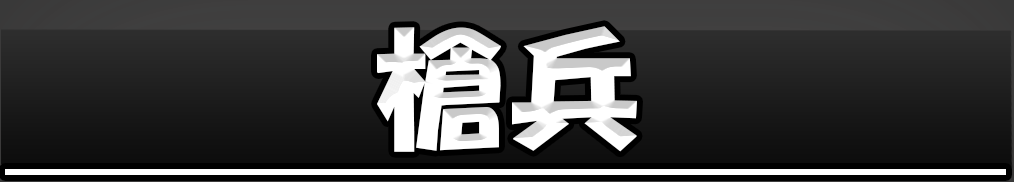
<style>
.page{position:relative;width:1014px;height:182px}
.page>*{position:absolute;margin:0}
.t1{font:130.2px "HGPSoeiKakupoptai";letter-spacing:0.05em;color:#ffffff}
</style>
<div class="page">
<p class="t1" style="left:377px;top:26px;width:260px;height:126px">槍兵</p>
</div>
